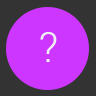
<style>
.page{position:relative;width:96px;height:96px;background:#cd36ff}
.page>*{position:absolute;margin:0}
.t1{font:41.7px "Roboto-Light";color:#f1f1f1}
</style>
<div class="page">
<p class="t1" style="left:40px;top:32px;width:17px;height:30px">?</p>
</div>
